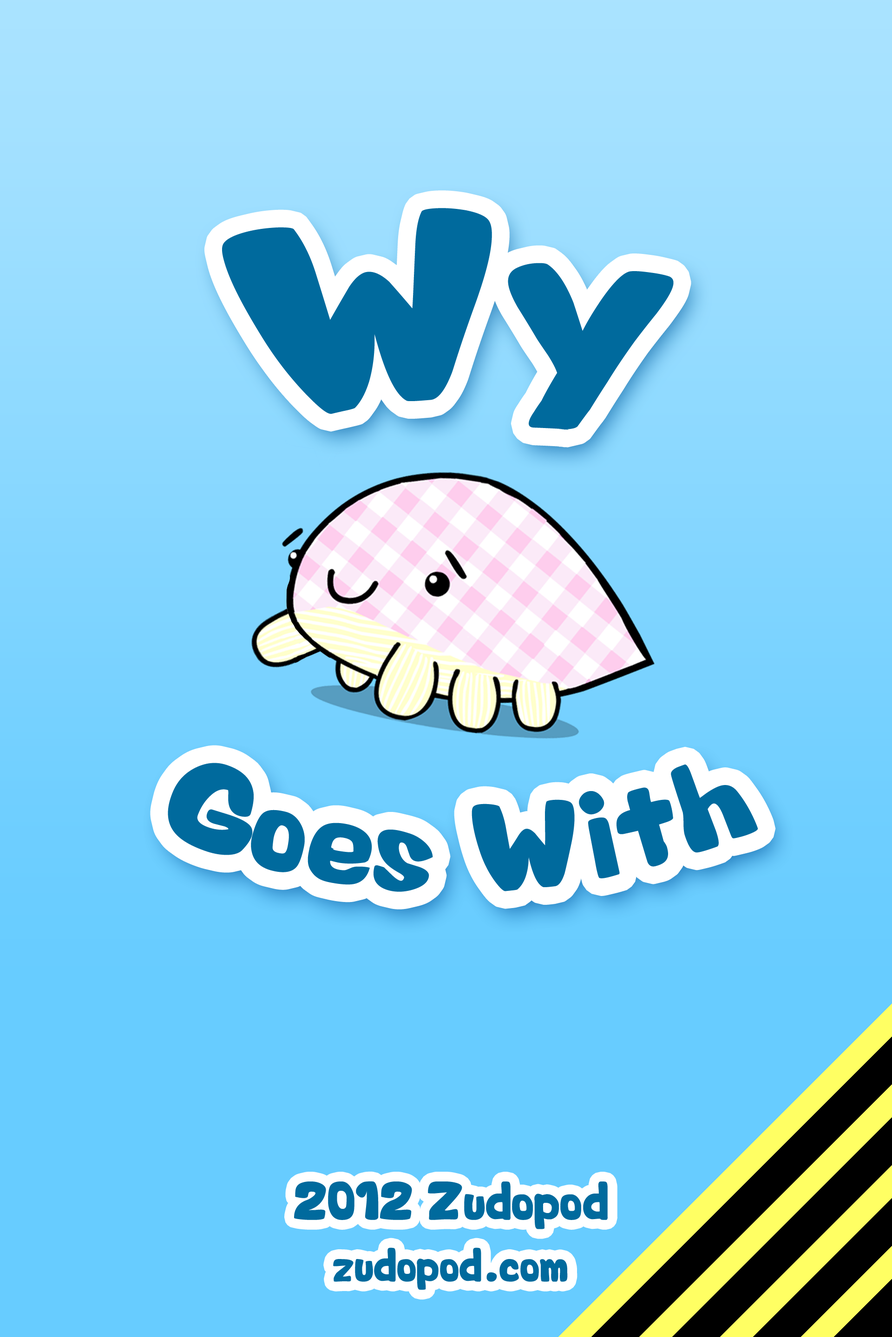
<style>
.page{position:relative;width:892px;height:1337px;background:#67ccff}
.page>*{position:absolute;margin:0}
.t1{font:247.6px "Valentine";letter-spacing:0.01em;color:#006a9d}
.t2{font:111.3px "Valentine";letter-spacing:0.01em;color:#006a9d}
.t3{font:48.2px "Valentine";letter-spacing:0.01em;color:#006a9d}
.t4{font:42.5px "Valentine";letter-spacing:0.01em;color:#006a9d}
</style>
<div class="page">
<p class="t1" style="left:222px;top:208px;width:451px;height:222px;rotate:-3deg">Wy</p>
<p class="t2" style="left:168px;top:763px;width:590px;height:129px">Goes With</p>
<p class="t3" style="left:294px;top:1181px;width:313px;height:49px">2012 Zudopod</p>
<p class="t4" style="left:333px;top:1248px;width:234px;height:43px">zudopod.com</p>
</div>
